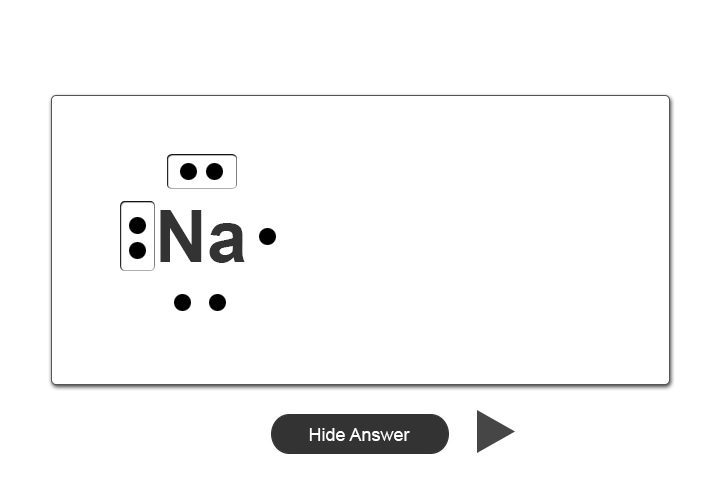
<style>
.page{position:relative;width:720px;height:480px;background:#ffffff}
.page>*{position:absolute;margin:0}
.t1{font:72px "Arial-BoldMT";color:#333333}
.t2{font:18px "ArialMT";color:#fffefe}
</style>
<div class="page">
<p class="t1" style="left:160px;top:210px;width:85px;height:53px">Na</p>
<p class="t2" style="left:309px;top:428px;width:101px;height:13px">Hide Answer</p>
</div>
